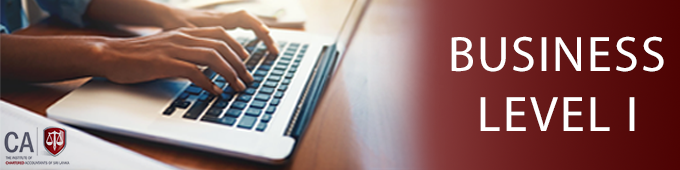
<style>
.page{position:relative;width:680px;height:170px}
.page>*{position:absolute;margin:0}
.t1{font:50px "MyriadPro-Regular";letter-spacing:0.04em;color:#ffffff}
</style>
<div class="page">
<p class="t1" style="left:451px;top:36px;width:213px;height:95px;text-align:center">BUSINESS<br>LEVEL I</p>
</div>
